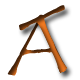
<style>
.page{position:relative;width:80px;height:80px;background:#ffffff}
.page>*{position:absolute;margin:0}
.t1{font:90px "TempusSansITC"}
.t2{font:80px "TempusSansITC"}
</style>
<div class="page">
<p class="t1" style="left:19px;top:5px;width:48px;height:69px;rotate:-26deg">T</p>
<p class="t2" style="left:7px;top:15px;width:59px;height:61px;rotate:-2deg">A</p>
</div>
